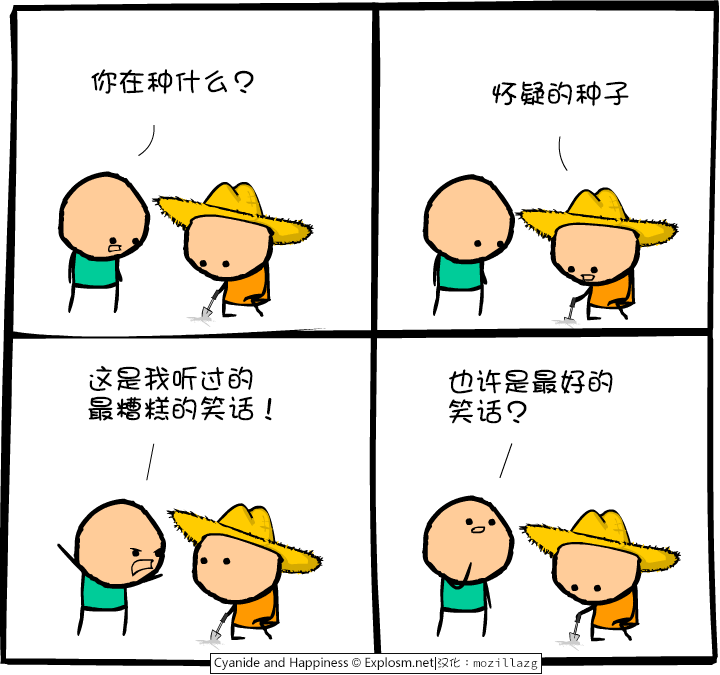
<style>
.page{position:relative;width:720px;height:675px;background:#ffffff}
.page>*{position:absolute;margin:0}
.t1{font:28px "DFGirl";color:#000000}
.t2{font:28px/30px "DFGirl";color:#000000}
</style>
<div class="page">
<p class="t1" style="left:91px;top:69px;width:163px;height:26px">你在种什么？</p>
<p class="t1" style="left:492px;top:81px;width:137px;height:26px">怀疑的种子</p>
<p class="t2" style="left:88px;top:365px;width:184px;height:56px">这是我听过的<br>最糟糕的笑话！</p>
<p class="t2" style="left:449px;top:369px;width:164px;height:55px">也许是最好的<br>笑话？</p>
</div>
